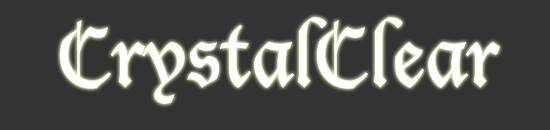
<style>
.page{position:relative;width:550px;height:130px;background:#333333}
.page>*{position:absolute;margin:0}
.t1{font:81.4px "LucidaBlackletter";color:#ffffff;scale:0.97 1}
</style>
<div class="page">
<p class="t1" style="left:60px;top:17px;width:440px;height:87px">CrystalClear</p>
</div>
